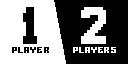
<style>
.page{position:relative;width:128px;height:64px;background:#ffffff}
.page>*{position:absolute;margin:0}
.t1{font:48px "Big-Apple-3PM";letter-spacing:0.02em;color:#000000}
.t2{font:48px "Big-Apple-3PM";letter-spacing:0.02em;color:#ffffff}
.t3{font:15.4px "Gamer";letter-spacing:0.02em;color:#000000}
.t4{font:15.4px "Gamer";letter-spacing:0.02em;color:#ffffff}
</style>
<div class="page">
<p class="t1" style="left:23px;top:7px;width:14px;height:37px">1</p>
<p class="t2" style="left:81px;top:7px;width:25px;height:37px">2</p>
<p class="t3" style="left:12px;top:47px;width:37px;height:6px">PLAYER</p>
<p class="t4" style="left:73px;top:47px;width:43px;height:6px">PLAYERS</p>
</div>
